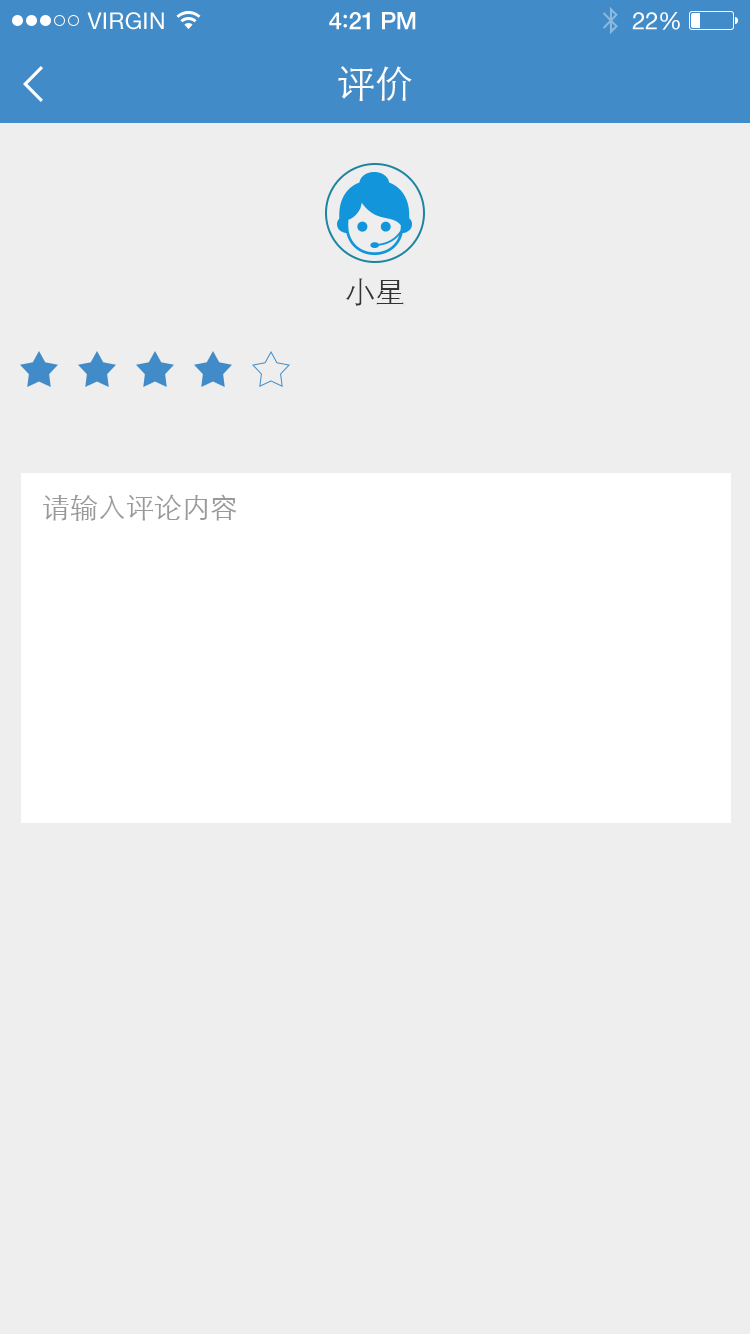
<style>
.page{position:relative;width:750px;height:1334px;background:#eeeeee}
.page>*{position:absolute;margin:0}
.t1{font:23px "HelveticaNeue";letter-spacing:0.02em;color:#ffffff}
.t2{font:24px "HelveticaNeue-Medium";letter-spacing:-0.02em;color:#ffffff}
.t3{font:26px "Avenir-Medium";letter-spacing:-0.02em;color:#ffffff}
.t4{font:24px "HelveticaNeue";letter-spacing:-0.02em;color:#ffffff}
.t5{font:38px "STXihei";color:#ffffff}
.t6{font:30px "STXihei";color:#333333}
.t7{font:28px "STXihei";color:#999999}
</style>
<div class="page">
<p class="t1" style="left:87px;top:12px;width:77px;height:18px">VIRGIN</p>
<p class="t2" style="left:329px;top:12px;width:87px;height:18px">4<span class="t3">:</span>21 PM</p>
<p class="t4" style="left:632px;top:12px;width:48px;height:18px">22%</p>
<p class="t5" style="left:338px;top:66px;width:74px;height:35px">评价</p>
<p class="t6" style="left:346px;top:278px;width:58px;height:28px">小星</p>
<p class="t7" style="left:43px;top:494px;width:194px;height:27px">请输入评论内容</p>
</div>
